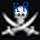
<style>
.page{position:relative;width:40px;height:40px}
.page>*{position:absolute;margin:0}
.t1{font:14.4px "SimSun";color:#0a3caf}
</style>
<div class="page">
<p class="t1" style="left:13px;top:3px;width:7px;height:9px">K</p>
<p class="t1" style="left:22px;top:1px;width:7px;height:14px">R</p>
</div>
